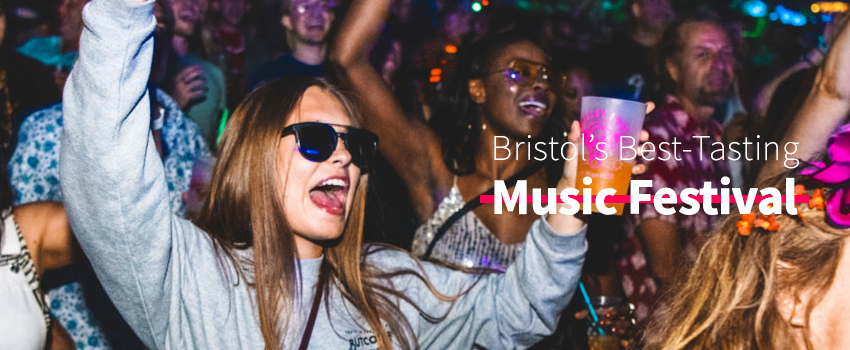
<style>
.page{position:relative;width:850px;height:350px}
.page>*{position:absolute;margin:0}
.t1{font:33px "NotoSansKR-Thin";letter-spacing:0.02em;color:#ffffff}
.t2{font:45px "NotoSansKR-Black";letter-spacing:-0.02em;color:#ffffff}
</style>
<div class="page">
<p class="t1" style="left:494px;top:133px;width:305px;height:82px">Bristol’s Best-Tasting<br><span class="t2">Music Festival</span></p>
</div>
